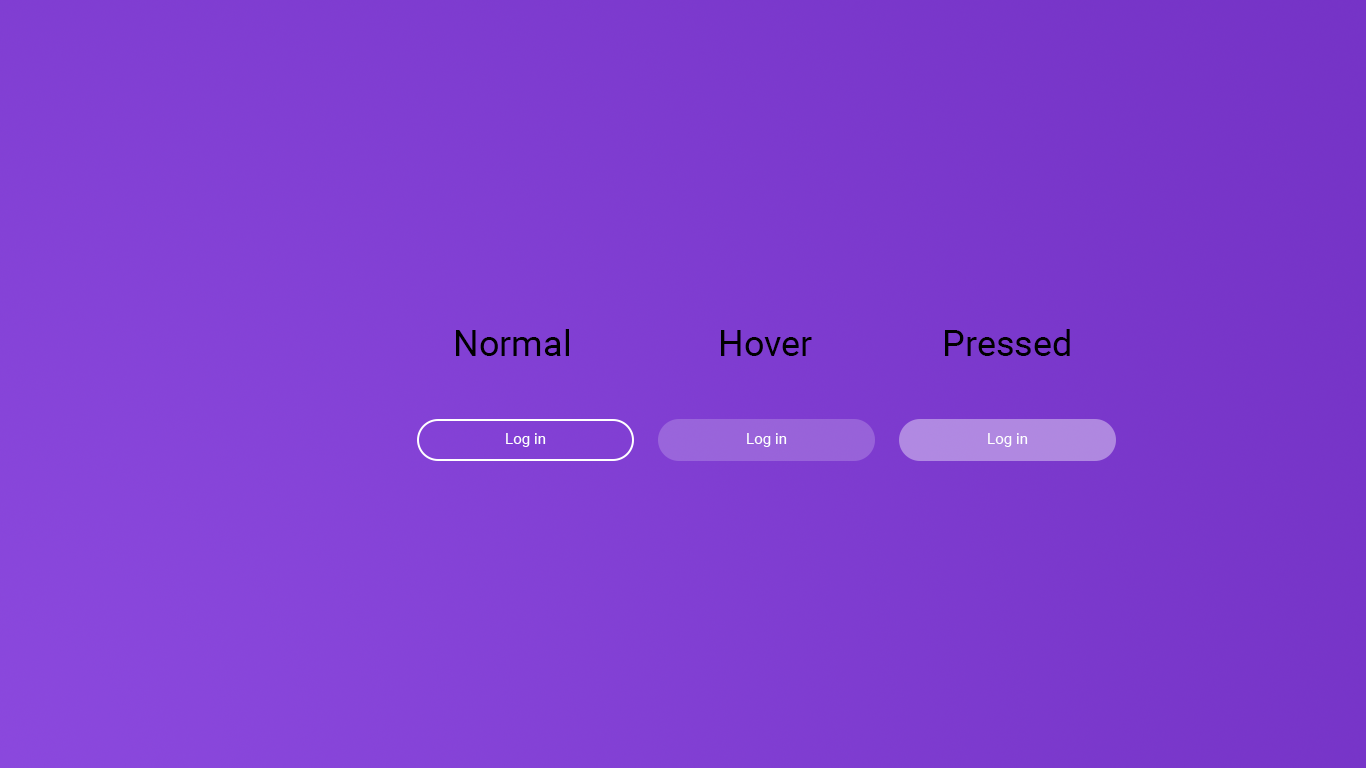
<style>
.page{position:relative;width:1366px;height:768px}
.page>*{position:absolute;margin:0}
.t1{font:36px "Roboto-Regular";color:#000000}
.t2{font:15.1px "Roboto-Regular";color:#ffffff}
</style>
<div class="page">
<p class="t1" style="left:456px;top:329px;width:113px;height:27px">Normal</p>
<p class="t1" style="left:945px;top:329px;width:125px;height:27px">Pressed</p>
<p class="t1" style="left:721px;top:330px;width:91px;height:26px">Hover</p>
<p class="t2" style="left:506px;top:433px;width:40px;height:14px">Log in</p>
<p class="t2" style="left:747px;top:433px;width:40px;height:14px">Log in</p>
<p class="t2" style="left:988px;top:433px;width:40px;height:14px">Log in</p>
</div>
